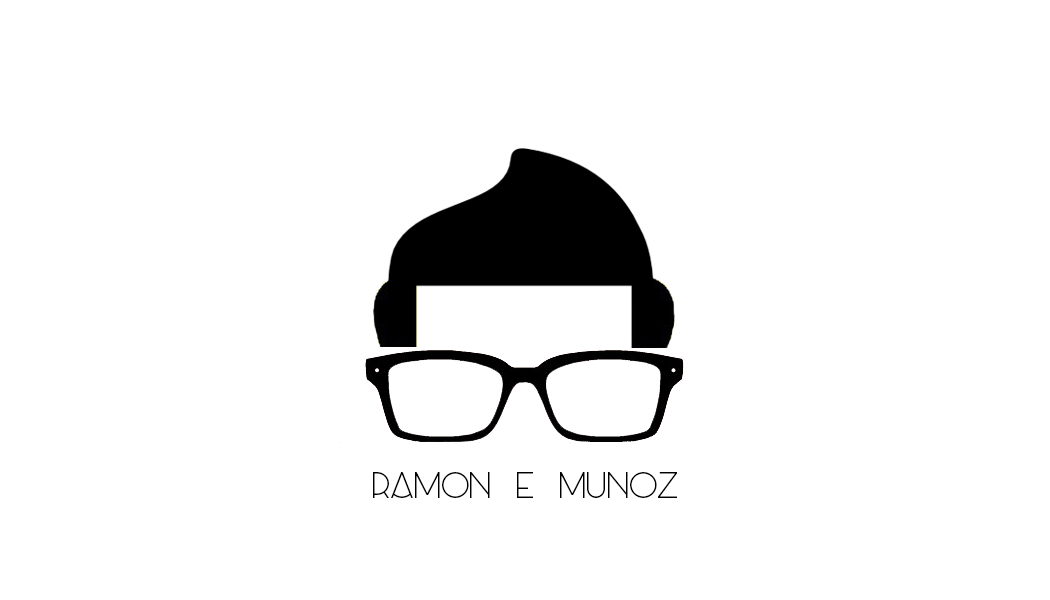
<style>
.page{position:relative;width:1050px;height:600px;background:#ffffff}
.page>*{position:absolute;margin:0}
.t1{font:12px "Azedo-Light";color:#000000}
</style>
<div class="page">
<p class="t1" style="left:373px;top:472px;width:304px;height:26px">Ramon E Munoz</p>
</div>
